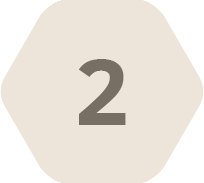
<style>
.page{position:relative;width:204px;height:183px;background:#ede5da}
.page>*{position:absolute;margin:0}
.t1{font:96px "ClearSans-Bold";color:#776f64}
</style>
<div class="page">
<p class="t1" style="left:79px;top:59px;width:47px;height:66px">2</p>
</div>
